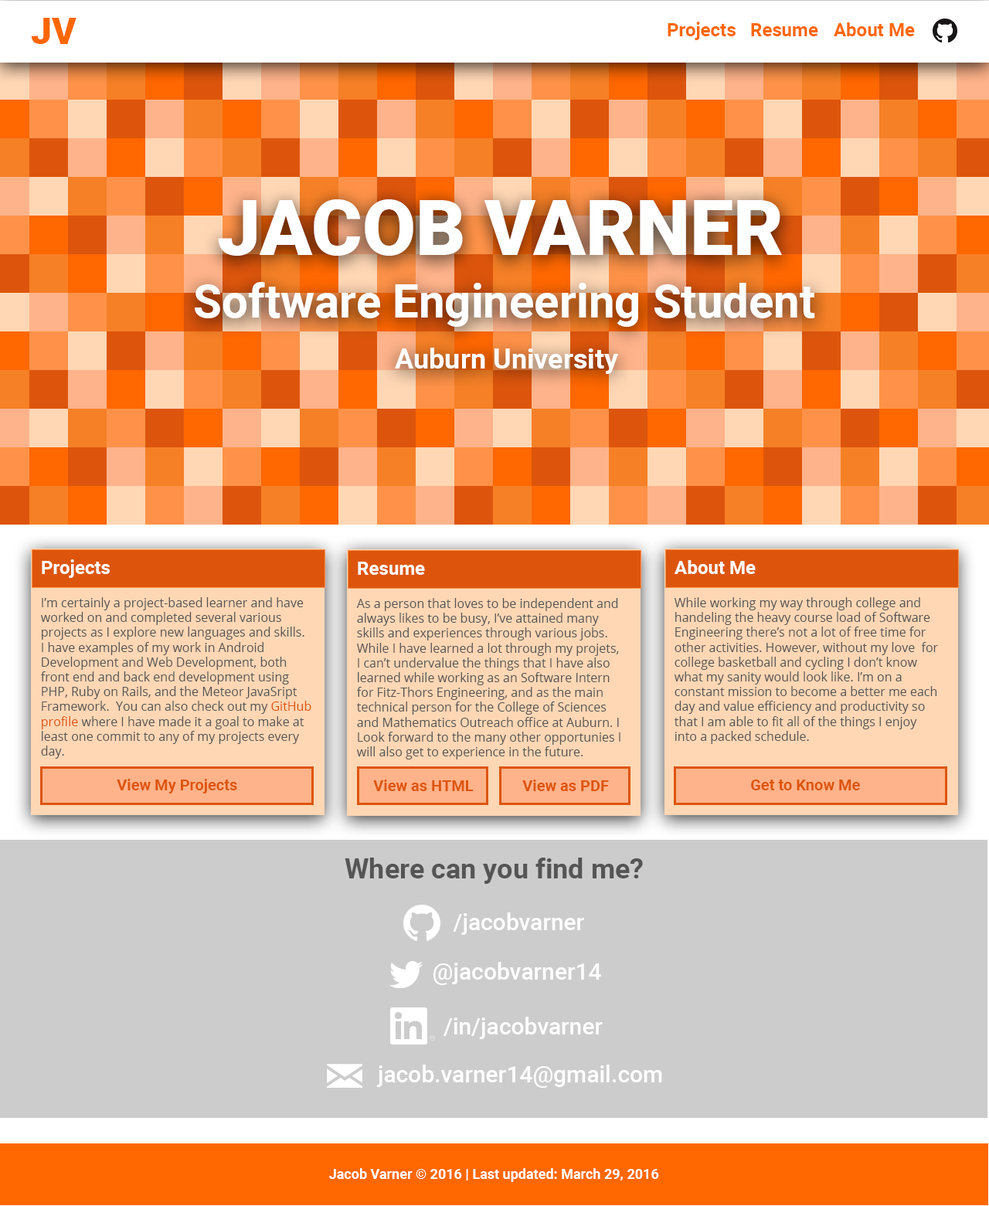
<style>
.page{position:relative;width:989px;height:1206px;background:#cccccc}
.page>*{position:absolute;margin:0}
.t1{font:37.1px "Roboto-Black";color:#ff6700}
.t2{font:18.5px "Roboto-Bold";color:#ff6700}
.t3{font:77.3px "Roboto-Black";color:#ffffff;text-transform:uppercase}
.t4{font:46.4px "Roboto-Bold";color:#ffffff}
.t5{font:27.8px "Roboto-Bold";color:#ffffff}
.t6{font:18.5px "Roboto-Bold";color:#ffffff}
.t7{font:12.4px "OpenSans";color:#555555}
.t8{font:12.4px "OpenSans";color:#dd550c}
.t9{font:15.5px "Roboto-Bold";color:#dd550c}
.t10{font:27.8px "Roboto-Bold";color:#555555}
.t11{font:23.2px "Roboto-Medium";color:#ffffff}
.t12{font:13.9px "Roboto-Bold";color:#ffffff}
</style>
<div class="page">
<p class="t1" style="left:31px;top:18px;width:45px;height:26px">JV</p>
<p class="t2" style="left:667px;top:22px;width:248px;height:18px">Projects Resume About Me</p>
<p class="t3" style="left:218px;top:199px;width:564px;height:57px">Jacob Varner</p>
<p class="t4" style="left:195px;top:282px;width:620px;height:45px">Software Engineering Student</p>
<p class="t5" style="left:395px;top:348px;width:223px;height:26px">Auburn University</p>
<p class="t6" style="left:42px;top:559px;width:68px;height:19px">Projects</p>
<p class="t6" style="left:358px;top:562px;width:67px;height:13px">Resume</p>
<p class="t6" style="left:674px;top:560px;width:82px;height:14px">About Me</p>
<p class="t7" style="left:41px;top:597px;width:270px;height:162px">I’m certainly a project-based learner and have<br>worked on and completed several various<br>projects as I explore new languages and skills.<br>I have examples of my work in Android <br>Development and Web Development, both<br>front end and back end development using<br>PHP, Ruby on Rails, and the Meteor JavaSript<br>Framework.  You can also check out my <span class="t8">GitHub<br>profile</span> where I have made it a goal to make at<br>least one commit to any of my projects every<br>day.</p>
<p class="t7" style="left:356px;top:598px;width:264px;height:161px">As a person that loves to be independent and<br>always likes to be busy, I’ve attained many<br>skills and experiences through various jobs.<br>While I have learned a lot through my projets,<br>I can’t undervalue the things that I have also<br>learned while working as an Software Intern<br>for Fitz-Thors Engineering, and as the main<br>technical person for the College of Sciences<br>and Mathematics Outreach office at Auburn. I<br>Look forward to the many other opportunies I<br>will also get to experience in the future.</p>
<p class="t7" style="left:674px;top:597px;width:264px;height:147px">While working my way through college and<br>handeling the heavy course load of Software<br>Engineering there’s not a lot of free time for<br>other activities. However, without my love  for<br>college basketball and cycling I don’t know<br>what my sanity would look like. I’m on a<br>constant mission to become a better me each<br>day and value efficiency and productivity so<br>that I am able to fit all of the things I enjoy<br>into a packed schedule.</p>
<p class="t9" style="left:117px;top:779px;width:120px;height:14px">View My Projects</p>
<p class="t9" style="left:373px;top:779px;width:101px;height:12px">View as HTML</p>
<p class="t9" style="left:522px;top:779px;width:87px;height:12px">View as PDF</p>
<p class="t9" style="left:751px;top:779px;width:109px;height:11px">Get to Know Me</p>
<p class="t10" style="left:345px;top:857px;width:298px;height:27px">Where can you find me?</p>
<p class="t11" style="left:453px;top:912px;width:131px;height:23px">/jacobvarner</p>
<p class="t11" style="left:433px;top:962px;width:168px;height:23px">@jacobvarner14</p>
<p class="t11" style="left:443px;top:1017px;width:160px;height:22px">/in/jacobvarner</p>
<p class="t11" style="left:376px;top:1065px;width:286px;height:23px">jacob.varner14@gmail.com</p>
<p class="t12" style="left:329px;top:1168px;width:330px;height:14px">Jacob Varner © 2016 | Last updated: March 29, 2016</p>
</div>
